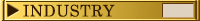
<style>
.page{position:relative;width:200px;height:21px}
.page>*{position:absolute;margin:0}
.t1{font:16px "CenturySchoolbook";letter-spacing:0.025em;color:#321a02}
</style>
<div class="page">
<p class="t1" style="left:23px;top:4px;width:92px;height:13px">INDUSTRY</p>
</div>
